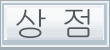
<style>
.page{position:relative;width:110px;height:50px}
.page>*{position:absolute;margin:0}
.t1{font:35.5px "Gulim";color:#52595e}
</style>
<div class="page">
<p class="t1" style="left:16px;top:9px;width:74px;height:29px">상 점</p>
</div>
